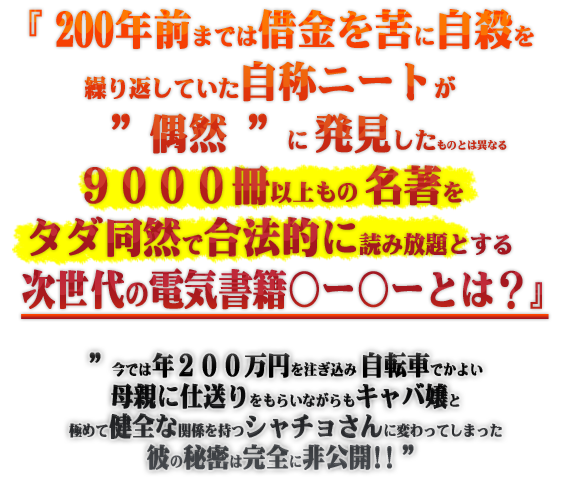
<style>
.page{position:relative;width:580px;height:500px;background:#ffffff}
.page>*{position:absolute;margin:0}
.t1{font:42px/52px "NIS-M9-83pv-RKSJ-H";font-weight:bold;scale:0.8 1}
.t2{font:42px/52px "NIS-M9-83pv-RKSJ-H";font-weight:bold;scale:0.9 1}
.t3{font:24px/52px "NIS-M9-83pv-RKSJ-H";font-weight:bold;scale:0.9 1}
.t4{font:11px/52px "NIS-M9-83pv-RKSJ-H";font-weight:bold;scale:0.9 1}
.t5{font:30px/52px "NIS-M9-83pv-RKSJ-H";font-weight:bold;scale:0.8 1}
.t6{font:15.3px/30.5px "NIS-M9-83pv-RKSJ-H";font-weight:bold;scale:0.84 1}
.t7{font:26.7px/30.5px "NIS-M9-83pv-RKSJ-H";font-weight:bold;scale:0.84 1}
.t8{font:15.3px/38.2px "NIS-M9-83pv-RKSJ-H";font-weight:bold;scale:0.84 1}
.t9{font:26.7px/38.2px "NIS-M9-83pv-RKSJ-H";font-weight:bold;scale:0.84 1}
</style>
<div class="page">
<p class="t1" style="left:22px;top:9px;width:520px;height:301px;text-align:center"><span class="t2">『 </span><span class="t2">200年前</span><span class="t3">までは</span><span class="t2">借金を苦</span><span class="t3">に</span><span class="t2">自殺</span><span class="t3">を<br>繰り返していた</span><span class="t2">自称ニート</span><span class="t3">が<br></span><span class="t2">　　”偶然  ”</span><span class="t3">に </span><span class="t2">発見</span><span class="t3">した</span><span class="t4">ものとは異なる<br></span><span class="t2">９０００冊</span><span class="t3">以上もの </span><span class="t2">名著</span><span class="t3">を<br></span><span class="t2">タダ同然</span><span class="t3">で</span><span class="t2">合法的に</span><span class="t3">読み放題とする<br></span>　 次世代<span class="t5">の</span>電気書籍○ー○ーとは？』</p>
<p class="t6" style="left:69px;top:352px;width:433px;height:118px;text-align:center"><span class="t7">”</span><span class="t8">今では</span><span class="t9">年２００万円</span><span class="t8">を注ぎ込み </span><span class="t7">自転車</span>でかよい<br><span class="t7">母親に仕送り</span>をもらいながらも<span class="t7">キャバ嬢</span>と<br>極めて<span class="t7">健全な</span>関係を持つ<span class="t7">シャチョさん</span>に変わってしまった<br><span class="t7">彼</span>の<span class="t7">秘密</span>は<span class="t7">完全</span>に<span class="t7">非公開!! ”</span></p>
</div>
